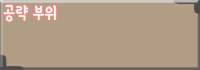
<style>
.page{position:relative;width:200px;height:70px;background:#b19d86}
.page>*{position:absolute;margin:0}
.t1{font:20px "YanoljaYacheR";color:#ffffff}
</style>
<div class="page">
<p class="t1" style="left:3px;top:4px;width:53px;height:18px">공략 부위</p>
</div>
